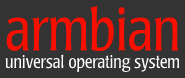
<style>
.page{position:relative;width:185px;height:78px;background:#333333}
.page>*{position:absolute;margin:0}
.t1{font:60px "Poppl-Laudatio-CondensedLight";color:#f71000}
.t2{font:18px "Poppl-Laudatio-CondensedLight";color:#ffffff}
</style>
<div class="page">
<p class="t1" style="left:6px;top:5px;width:172px;height:46px">armbian</p>
<p class="t2" style="left:5px;top:54px;width:174px;height:18px">universal operating system</p>
</div>
